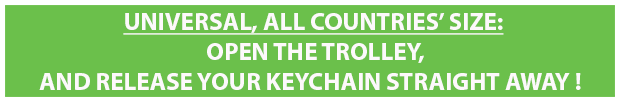
<style>
.page{position:relative;width:620px;height:102px;background:#6bc04b}
.page>*{position:absolute;margin:0}
.t1{font:25px "MyriadPro-Bold";color:#fdf9fb}
.t2{font:26px "MyriadPro-Bold";color:#fdf9fb}
.t3{font:25px "MyriadPro-Bold";color:#fdf9fb;text-decoration:underline}
</style>
<div class="page">
<p class="t1" style="left:39px;top:13px;width:542px;height:77px"><span class="t2">                 </span><span class="t3">UNIVERSAL, ALL COUNTRIES’ SIZE:<br></span>                                  OPEN THE TROLLEY, <br> AND RELEASE YOUR KEYCHAIN STRAIGHT AWAY !</p>
</div>
